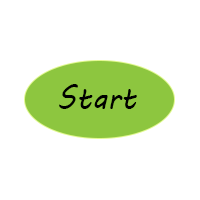
<style>
.page{position:relative;width:200px;height:200px;background:#ffffff}
.page>*{position:absolute;margin:0}
.t1{font:31px "MVBoli";color:#000000}
</style>
<div class="page">
<p class="t1" style="left:59px;top:84px;width:78px;height:25px">Start</p>
</div>
